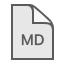
<style>
.page{position:relative;width:64px;height:64px;background:#ffffff}
.page>*{position:absolute;margin:0}
.t1{font:15px "SFProDisplay-Medium";color:#5b5b5b}
</style>
<div class="page">
<p class="t1" style="left:21px;top:34px;width:23px;height:12px">MD</p>
</div>
